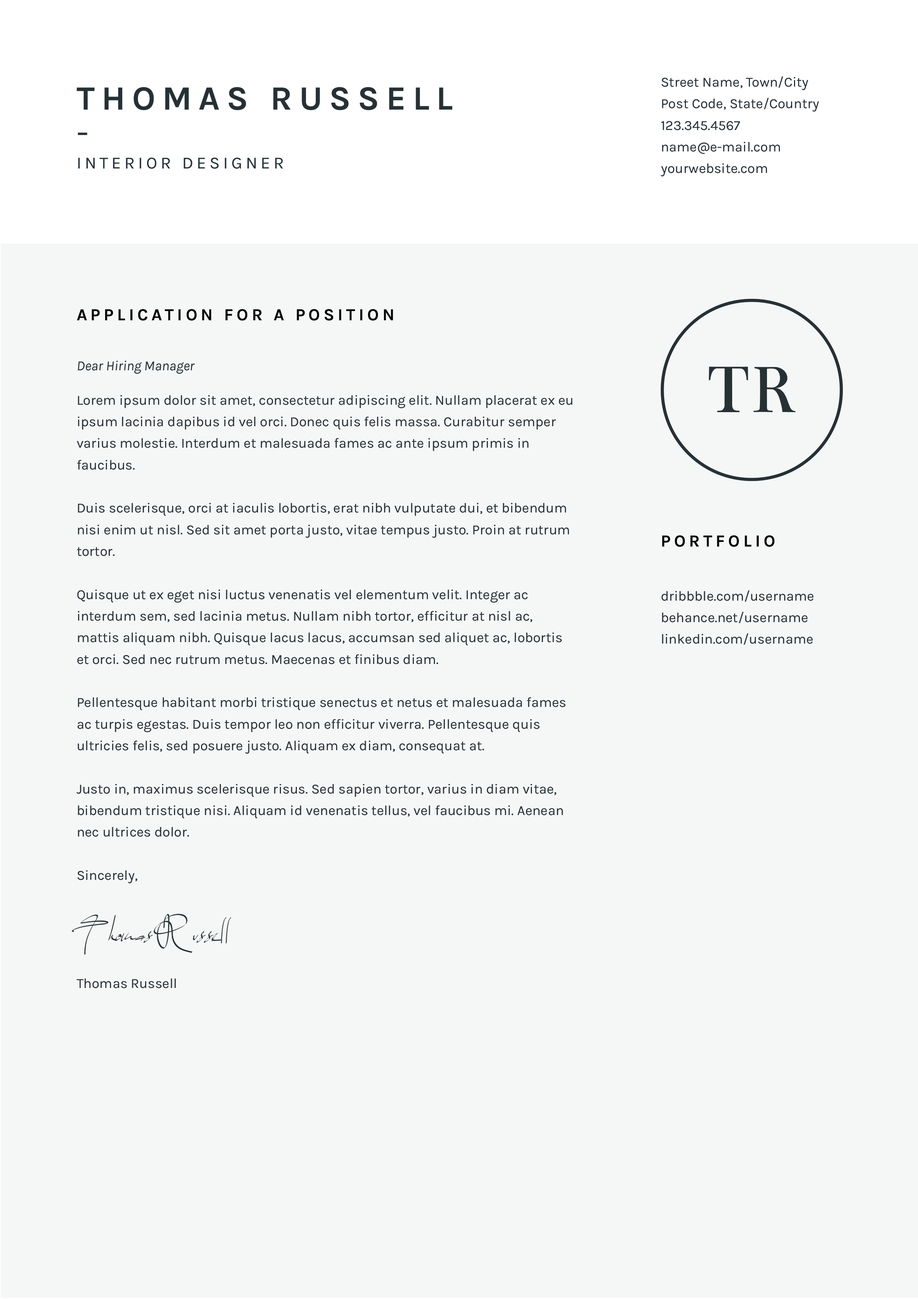
<style>
.page{position:relative;width:918px;height:1299px;background:#f5f7f6}
.page>*{position:absolute;margin:0}
.t1{font:13.9px/21.6px "Karla-Regular";color:#283337}
.t2{font:33.9px "Karla-Bold";letter-spacing:0.2em;color:#263135}
.t3{font:33.9px "Karla-Regular";letter-spacing:0.2em;color:#263135}
.t4{font:17px "Karla-Regular";letter-spacing:0.2em;color:#263135}
.t5{font:17px "Karla-Bold";letter-spacing:0.2em;color:#000000}
.t6{font:13.9px "Karla-Italic";color:#263135}
.t7{font:74px "BenthamRegular";color:#263135}
.t8{font:37px "PWSignaturetwo";color:#263135}
</style>
<div class="page">
<p class="t1" style="left:661px;top:76px;width:158px;height:101px">Street Name, Town/City<br>Post Code, State/Country<br>123.345.4567<br>name@e-mail.com<br>yourwebsite.com</p>
<p class="t2" style="left:77px;top:87px;width:375px;height:23px">THOMAS RUSSELL</p>
<p class="t3" style="left:78px;top:133px;width:9px;height:2px">-</p>
<p class="t4" style="left:78px;top:157px;width:205px;height:12px">INTERIOR DESIGNER</p>
<p class="t5" style="left:77px;top:309px;width:316px;height:12px">APPLICATION FOR A POSITION</p>
<p class="t6" style="left:78px;top:361px;width:117px;height:13px">Dear Hiring Manager</p>
<p class="t7" style="left:709px;top:367px;width:87px;height:45px">TR</p>
<p class="t1" style="left:77px;top:395px;width:495px;height:593px">Lorem ipsum dolor sit amet, consectetur adipiscing elit. Nullam placerat ex eu ipsum lacinia dapibus id vel orci. Donec quis felis massa. Curabitur semper varius molestie. Interdum et malesuada fames ac ante ipsum primis in faucibus. <br><br>Duis scelerisque, orci at iaculis lobortis, erat nibh vulputate dui, et bibendum nisi enim ut nisl. Sed sit amet porta justo, vitae tempus justo. Proin at rutrum tortor.<br><br>Quisque ut ex eget nisi luctus venenatis vel elementum velit. Integer ac interdum sem, sed lacinia metus. Nullam nibh tortor, efficitur at nisl ac, mattis aliquam nibh. Quisque lacus lacus, accumsan sed aliquet ac, lobortis et orci. Sed nec rutrum metus. Maecenas et finibus diam. <br><br>Pellentesque habitant morbi tristique senectus et netus et malesuada fames ac turpis egestas. Duis tempor leo non efficitur viverra. Pellentesque quis ultricies felis, sed posuere justo. Aliquam ex diam, consequat at. <br><br>Justo in, maximus scelerisque risus. Sed sapien tortor, varius in diam vitae, bibendum tristique nisi. Aliquam id venenatis tellus, vel faucibus mi. Aenean nec ultrices dolor. <br><br>Sincerely,<br><br><br><br><br>Thomas Russell</p>
<p class="t5" style="left:662px;top:535px;width:113px;height:12px">PORTFOLIO</p>
<p class="t1" style="left:662px;top:590px;width:152px;height:55px">dribbble.com/username<br>behance.net/username<br>linkedin.com/username</p>
<p class="t8" style="left:71px;top:913px;width:160px;height:42px">Thomas Russell</p>
</div>
